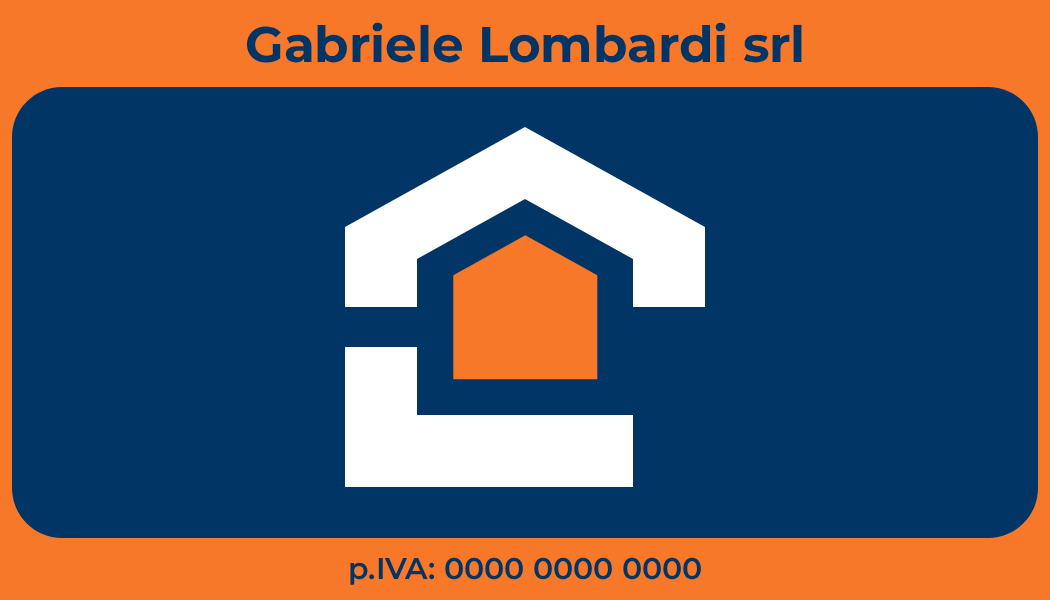
<style>
.page{position:relative;width:1050px;height:600px;background:#003566}
.page>*{position:absolute;margin:0}
.t1{font:50px "Montserrat-Bold";color:#003566}
.t2{font:30px "Montserrat-SemiBold";color:#003566}
</style>
<div class="page">
<p class="t1" style="left:246px;top:22px;width:556px;height:41px">Gabriele Lombardi srl</p>
<p class="t2" style="left:350px;top:557px;width:351px;height:28px">p.IVA: 0000 0000 0000</p>
</div>
